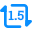
<style>
.page{position:relative;width:32px;height:32px;background:#ffffff}
.page>*{position:absolute;margin:0}
.t1{font:13px "RobotoSlab-Bold";color:#088efe}
</style>
<div class="page">
<p class="t1" style="left:8px;top:10px;width:16px;height:11px">1.5</p>
</div>
